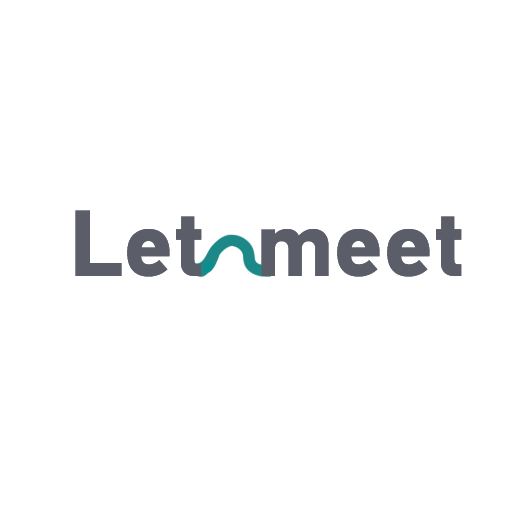
<style>
.page{position:relative;width:512px;height:512px;background:#ffffff}
.page>*{position:absolute;margin:0}
.t1{font:94.1px "PFDinTextUniversal-Bold";color:#5b5d68}
</style>
<div class="page">
<p class="t1" style="left:75px;top:210px;width:387px;height:67px">Let  meet</p>
</div>
